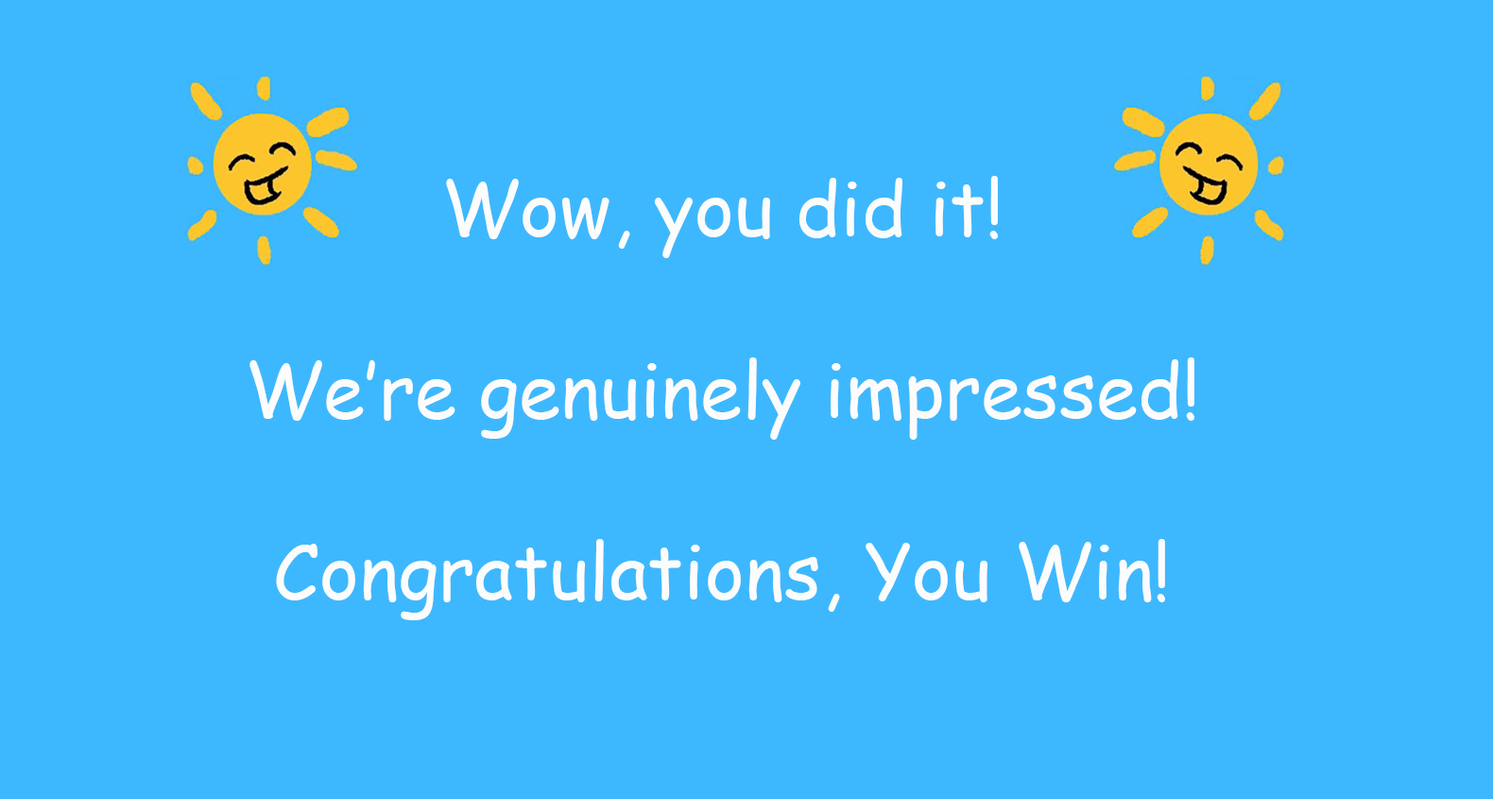
<style>
.page{position:relative;width:1493px;height:799px;background:#3db8fe}
.page>*{position:absolute;margin:0}
.t1{font:75.6px "ComicSansMS";color:#fcfcfc}
</style>
<div class="page">
<p class="t1" style="left:249px;top:176px;width:946px;height:444px;text-align:center">Wow, you did it!<br><br>We’re genuinely impressed!<br><br>Congratulations, You Win!</p>
</div>
